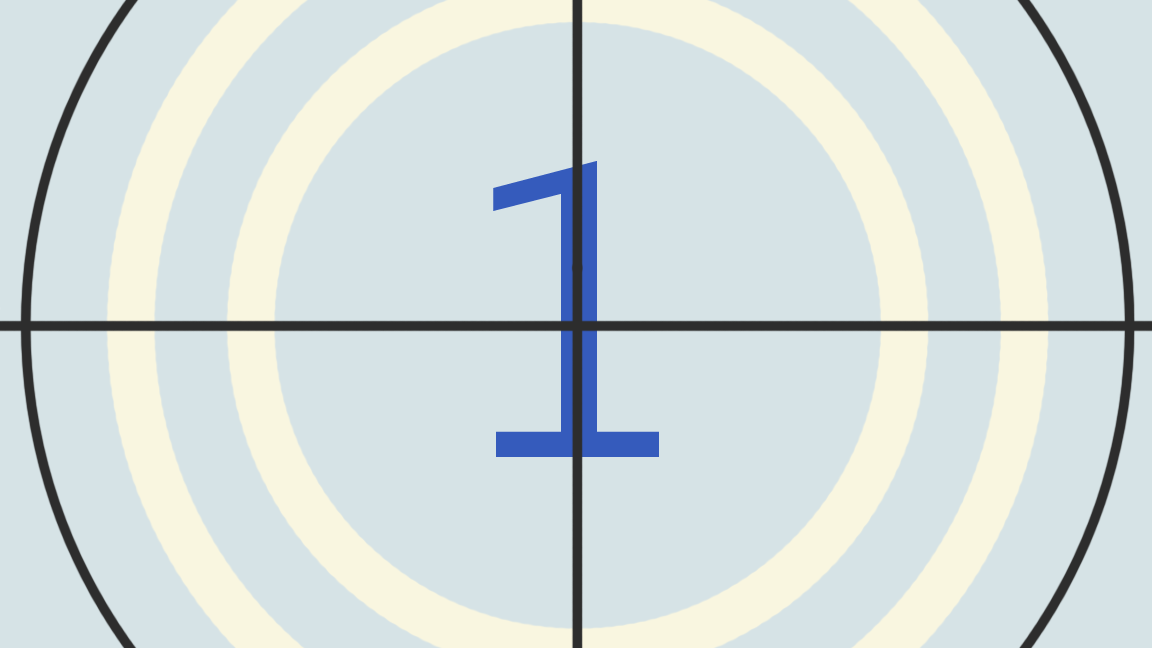
<style>
.page{position:relative;width:1152px;height:648px;background:#d6e3e6}
.page>*{position:absolute;margin:0}
.t1{font:400px "LetterGothicStd-Bold";letter-spacing:0.01em;color:#355bbc;scale:1.2 1}
</style>
<div class="page">
<p class="t1" style="left:493px;top:161px;width:166px;height:296px">1</p>
</div>
